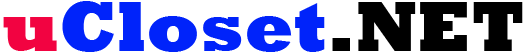
<style>
.page{position:relative;width:525px;height:54px;background:#ffffff}
.page>*{position:absolute;margin:0}
.t1{font:72px "Rockwell-ExtraBold";color:#0023fa}
.t2{font:72px "Rockwell-ExtraBold";color:#f20341}
.t3{font:72px "Rockwell-ExtraBold";color:#000000}
</style>
<div class="page">
<p class="t1" style="left:3px;top:1px;width:520px;height:51px"><span class="t2">u</span>Closet<span class="t3">.NET</span></p>
</div>
